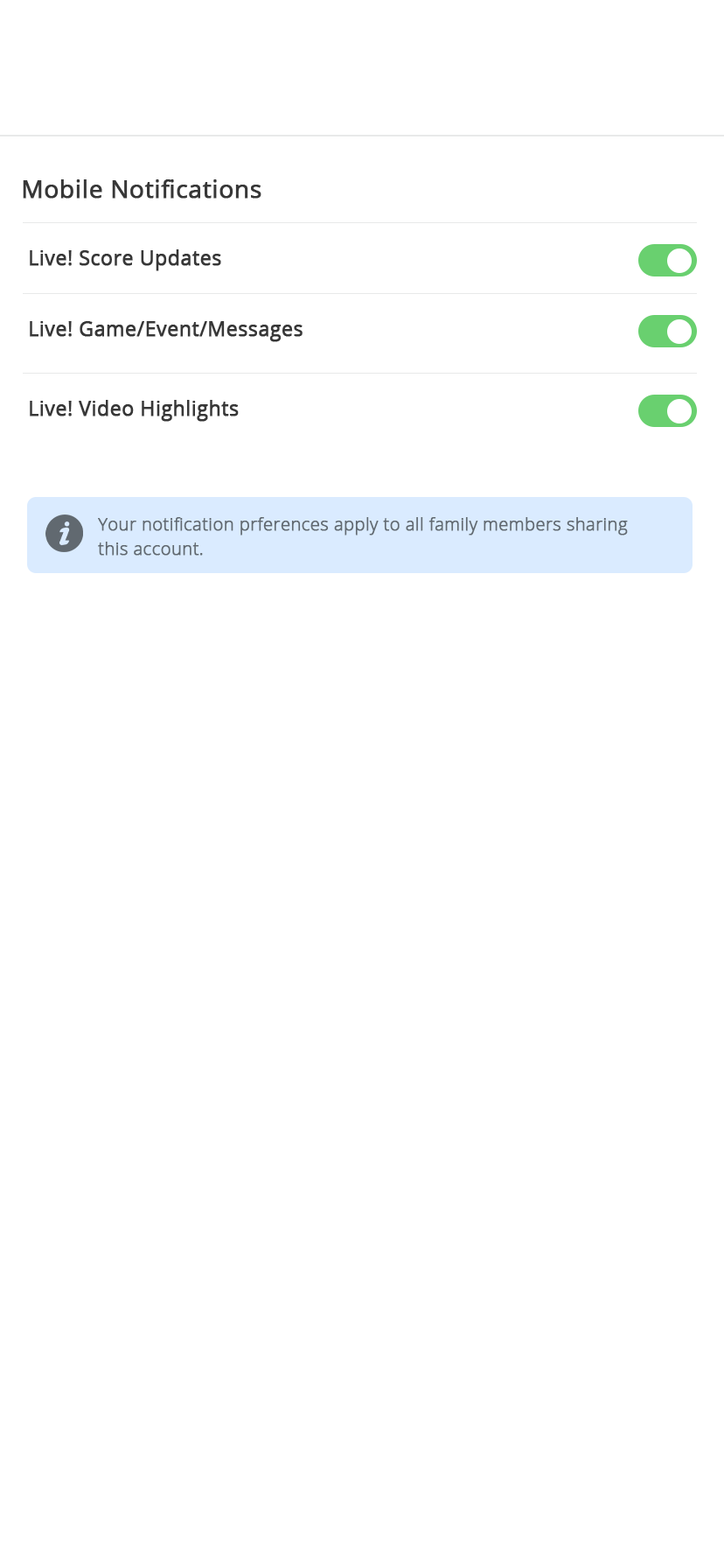
<style>
.page{position:relative;width:724px;height:1568px;background:#ffffff}
.page>*{position:absolute;margin:0}
.t1{font:24.5px "OpenSans";color:#373737;font-weight:bold}
.t2{font:20.1px "OpenSans";color:#373737;font-weight:bold}
.t3{font:17.5px/24.5px "OpenSans-Light";color:#616970;font-weight:bold}
</style>
<div class="page">
<p class="t1" style="left:23px;top:179px;width:239px;height:20px">Mobile Notifications</p>
<p class="t2" style="left:30px;top:249px;width:191px;height:22px">Live! Score Updates</p>
<p class="t2" style="left:30px;top:321px;width:273px;height:21px">Live! Game/Event/Messages</p>
<p class="t2" style="left:30px;top:400px;width:209px;height:22px">Live! Video Highlights</p>
<p class="t3" style="left:98px;top:517px;width:530px;height:39px">Your notification prferences apply to all family members sharing <br>this account.</p>
</div>
